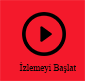
<style>
.page{position:relative;width:85px;height:81px;background:#f4192b}
.page>*{position:absolute;margin:0}
.t1{font:9px "TimesNewRomanPSMT";color:#060606}
</style>
<div class="page">
<p class="t1" style="left:19px;top:62px;width:57px;height:11px">İzlemeyi Başlat</p>
</div>
